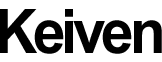
<style>
.page{position:relative;width:162px;height:62px;background:#ffffff}
.page>*{position:absolute;margin:0}
.t1{font:61.3px "Arial-BoldMT";letter-spacing:-0.075em;color:#000000;scale:0.96 1}
</style>
<div class="page">
<p class="t1" style="left:0px;top:9px;width:162px;height:45px">Keiven</p>
</div>
